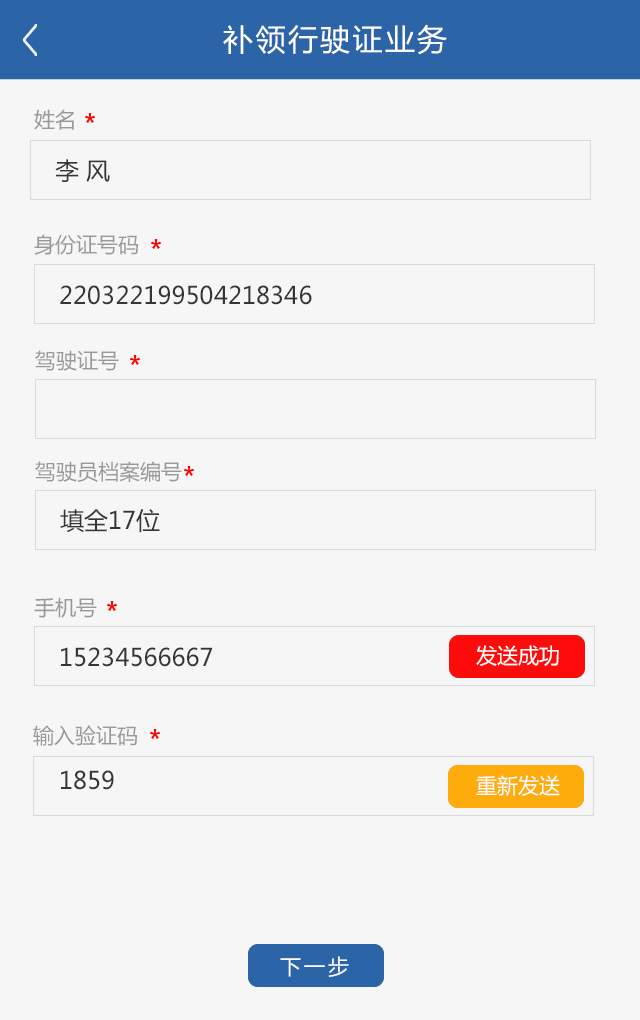
<style>
.page{position:relative;width:640px;height:1020px;background:#f6f6f6}
.page>*{position:absolute;margin:0}
.t1{font:30px "MicrosoftYaHei";letter-spacing:0.08em;color:#ffffff}
.t2{font:21px "MicrosoftYaHei";color:#999999}
.t3{font:24px "MicrosoftYaHei";color:#353535}
.t4{font:21px "MicrosoftYaHei";color:#ffffff}
.t5{font:21px "MicrosoftYaHei";letter-spacing:0.14em;color:#ffffff}
</style>
<div class="page">
<p class="t1" style="left:223px;top:24px;width:224px;height:31px">补领行驶证业务</p>
<p class="t2" style="left:34px;top:109px;width:40px;height:21px">姓名</p>
<p class="t3" style="left:55px;top:159px;width:55px;height:23px">李 风</p>
<p class="t2" style="left:34px;top:234px;width:104px;height:21px">身份证号码</p>
<p class="t3" style="left:60px;top:285px;width:252px;height:20px">220322199504218346</p>
<p class="t2" style="left:35px;top:350px;width:84px;height:21px">驾驶证号</p>
<p class="t2" style="left:35px;top:461px;width:147px;height:21px">驾驶员档案编号</p>
<p class="t3" style="left:60px;top:509px;width:100px;height:24px">填全17位</p>
<p class="t2" style="left:34px;top:597px;width:63px;height:21px">手机号</p>
<p class="t3" style="left:61px;top:647px;width:152px;height:20px">15234566667</p>
<p class="t4" style="left:476px;top:645px;width:83px;height:21px">发送成功</p>
<p class="t2" style="left:33px;top:725px;width:104px;height:21px">输入验证码</p>
<p class="t3" style="left:61px;top:770px;width:53px;height:20px">1859</p>
<p class="t4" style="left:476px;top:775px;width:84px;height:21px">重新发送</p>
<p class="t5" style="left:280px;top:956px;width:69px;height:21px">下一步</p>
</div>
